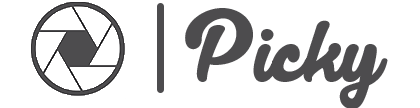
<style>
.page{position:relative;width:420px;height:108px;background:#ffffff}
.page>*{position:absolute;margin:0}
.t1{font:83.3px "LucytheCat-Regular";color:#4d4c4e}
</style>
<div class="page">
<p class="t1" style="left:185px;top:8px;width:203px;height:101px">Picky</p>
</div>
